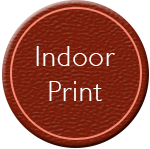
<style>
.page{position:relative;width:150px;height:149px;background:#ffffff}
.page>*{position:absolute;margin:0}
.t1{font:28.7px/34.5px "Humanist521BT-Light";letter-spacing:0.045em;color:#ffffff}
</style>
<div class="page">
<p class="t1" style="left:36px;top:46px;width:79px;height:55px;text-align:center">Indoor<br>Print</p>
</div>
